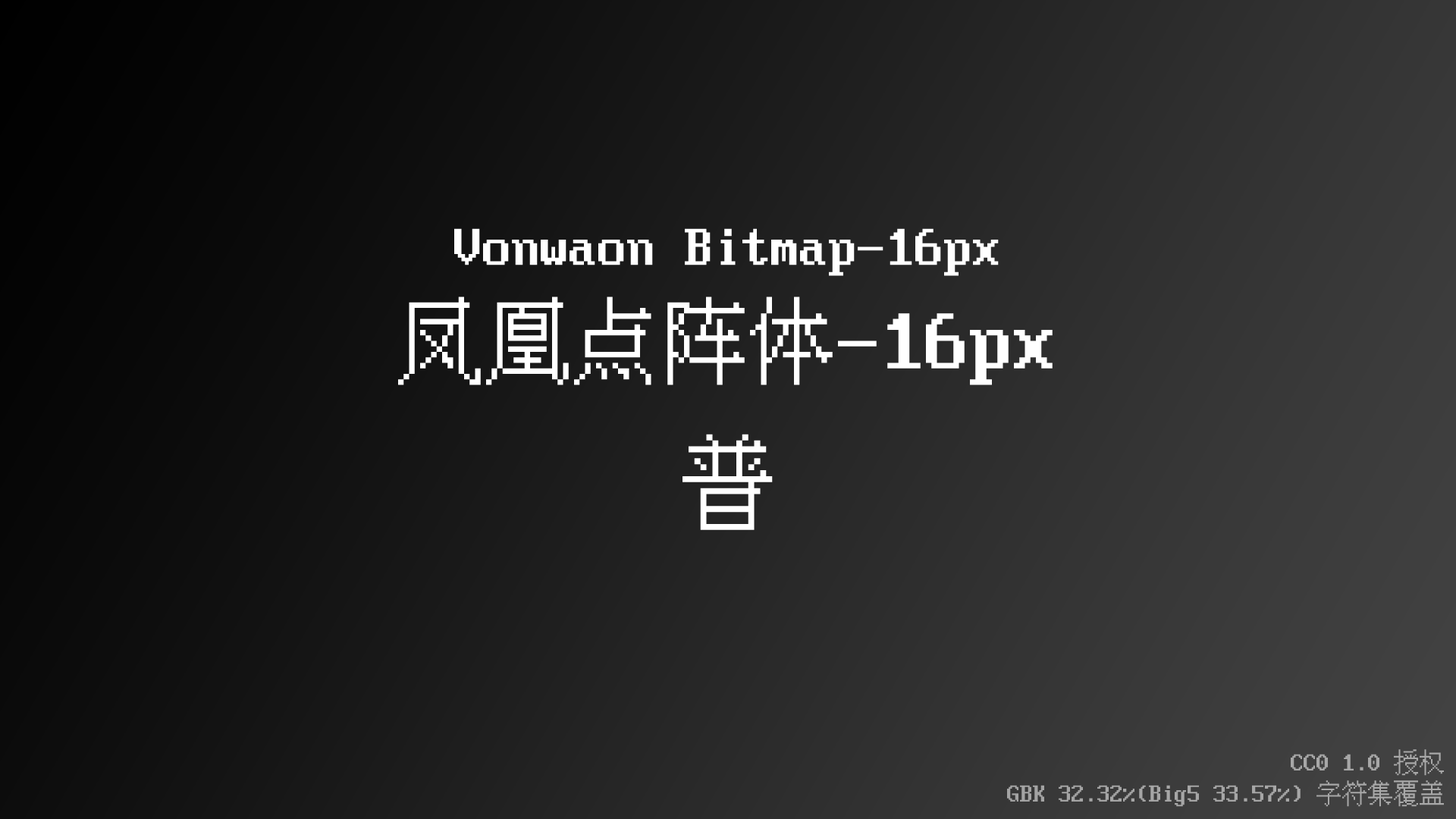
<style>
.page{position:relative;width:1456px;height:819px}
.page>*{position:absolute;margin:0}
.t1{font:57.6px "VonwaonBitmap-16px";color:#ffffff}
.t2{font:88px "VonwaonBitmap-16px";color:#ffffff}
.t3{font:95.5px "VonwaonBitmap-16px";color:#ffffff}
.t4{font:25.8px "VonwaonBitmap-16px";color:#a7a7a7}
</style>
<div class="page">
<p class="t1" style="left:398px;top:228px;width:655px;height:157px;text-align:center">Vonwaon Bitmap-16px<br><span class="t2">凤凰点阵体-16px</span></p>
<p class="t3" style="left:682px;top:434px;width:91px;height:96px">普</p>
<p class="t4" style="left:1007px;top:749px;width:437px;height:58px;text-align:right">CC0 1.0 授权<br> GBK 32.32%(Big5 33.57%) 字符集覆盖</p>
</div>
